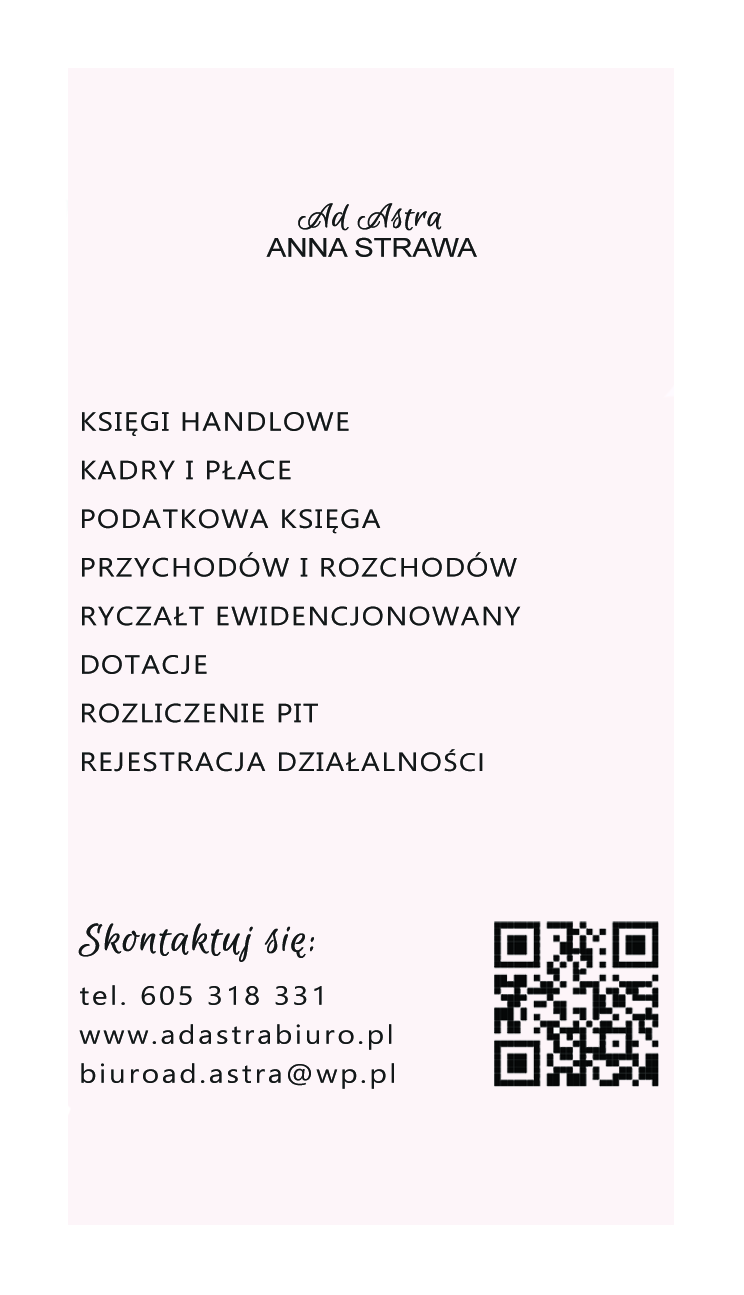
<style>
.page{position:relative;width:744px;height:1295px;background:#fdf5f9}
.page>*{position:absolute;margin:0}
.t1{font:35px "EuphoriaScript-Regular";color:#131718;font-weight:bold;scale:1.11 1}
.t2{font:26.3px "ArialMT";color:#131718;text-transform:uppercase;scale:1.11 1}
.t3{font:26.3px/48.6px "Gadugi";letter-spacing:0.05em;color:#131718;text-transform:uppercase;scale:1.11 1}
.t4{font:26.3px/48.6px "MyriadPro-Regular";letter-spacing:0.05em;color:#131718;text-transform:uppercase;scale:1.11 1}
.t5{font:43.7px "EuphoriaScript-Regular";color:#131718;font-weight:bold;scale:1.11 1}
.t6{font:26.3px/38.9px "Gadugi";letter-spacing:0.1em;color:#131718;scale:1.11 1}
</style>
<div class="page">
<p class="t1" style="left:298px;top:203px;width:144px;height:28px">Ad Astra</p>
<p class="t2" style="left:266px;top:237px;width:211px;height:20px">Anna Strawa</p>
<p class="t3" style="left:82px;top:412px;width:439px;height:360px">księgi handlowe  <br>kadry i płace <br>podatkowa księga <br>przychodów i rozchodów  <br>ryczałt ewidencjonowany  <br>dotacje <br>rozliczenie pit<br>rejestracja działalno<span class="t4">ści</span></p>
<p class="t5" style="left:78px;top:923px;width:236px;height:39px">Skontaktuj sie:</p>
<p class="t6" style="left:79px;top:985px;width:315px;height:104px">tel. 605 318 331<br>www.adastrabiuro.pl<br>biuroad.astra@wp.pl</p>
</div>
